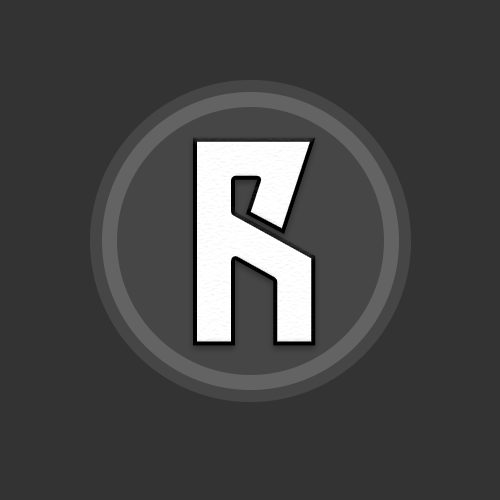
<style>
.page{position:relative;width:500px;height:500px;background:#333333}
.page>*{position:absolute;margin:0}
.t1{font:207.8px "HOcelotPiss-Regular";letter-spacing:0.002em;color:#ffffff}
</style>
<div class="page">
<p class="t1" style="left:193px;top:137px;width:123px;height:209px">r</p>
</div>
